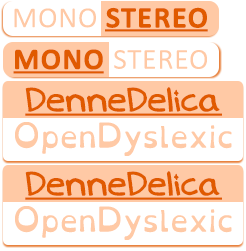
<style>
.page{position:relative;width:246px;height:251px;background:#ffffff}
.page>*{position:absolute;margin:0}
.t1{font:35.4px "Calibri";color:#e05a00;font-variant:small-caps;font-weight:bold}
.t2{font:35.4px "Calibri-Light";color:#ffc9a5;font-variant:small-caps}
.t3{font:29.2px "Denne-Delica";color:#e05a00}
.t4{font:29.2px "OpenDyslexicThree-Regular";color:#ffc9a5}
</style>
<div class="page">
<p class="t1" style="left:14px;top:7px;width:193px;height:21px"><span class="t2">mono </span>stereo</p>
<p class="t2" style="left:15px;top:49px;width:192px;height:21px"><span class="t1">mono</span> stereo</p>
<p class="t3" style="left:25px;top:87px;width:195px;height:25px">DenneDelica</p>
<p class="t4" style="left:15px;top:122px;width:217px;height:34px">OpenDyslexic</p>
<p class="t3" style="left:25px;top:171px;width:195px;height:25px">DenneDelica</p>
<p class="t4" style="left:15px;top:206px;width:217px;height:34px">OpenDyslexic</p>
</div>
